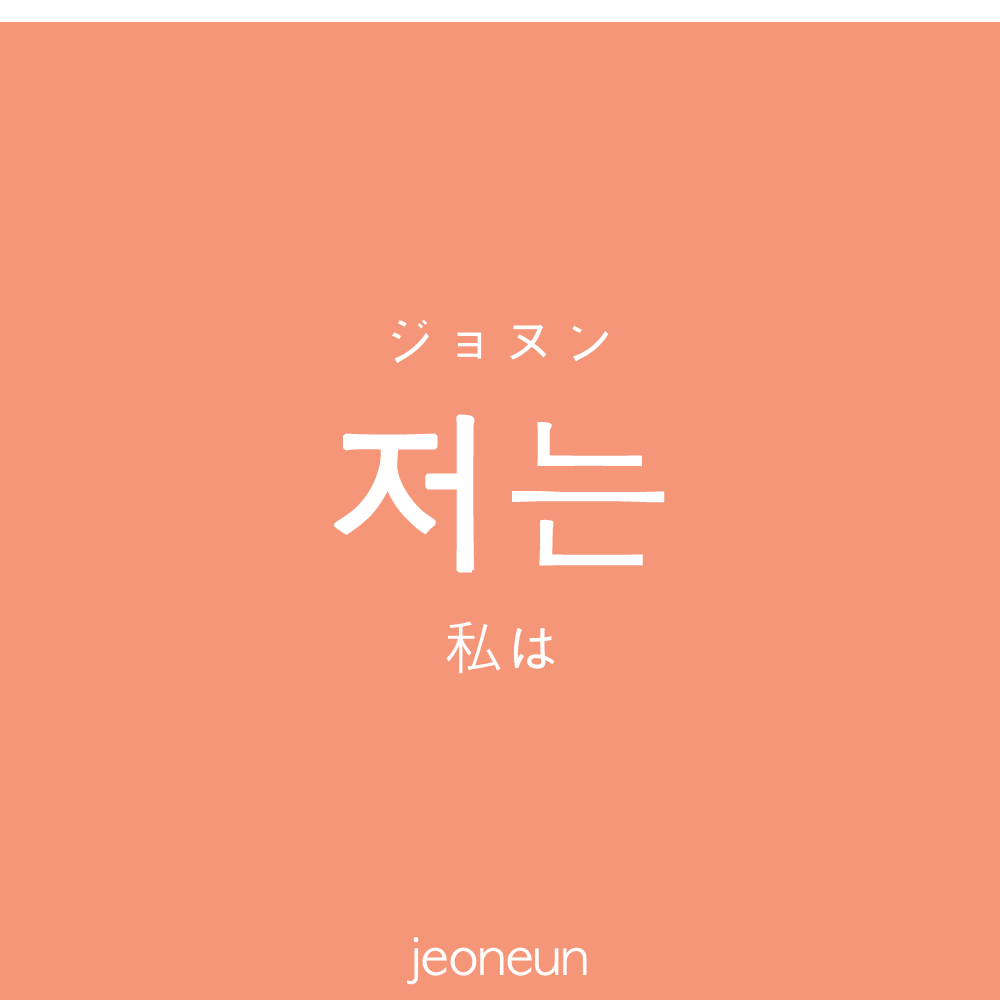
<style>
.page{position:relative;width:1000px;height:1000px;background:#f69679}
.page>*{position:absolute;margin:0}
.t1{font:60px "AppleGothic";color:#ffffff}
.t2{font:170px "AppleGothic";color:#ffffff;font-weight:bold}
.t3{font:50px "AppleGothic";color:#ffffff}
</style>
<div class="page">
<p class="t1" style="left:392px;top:319px;width:217px;height:44px">ジョヌン</p>
<p class="t2" style="left:334px;top:414px;width:331px;height:159px">저는</p>
<p class="t1" style="left:446px;top:621px;width:109px;height:53px">私は</p>
<p class="t3" style="left:407px;top:937px;width:180px;height:48px">jeoneun</p>
</div>
